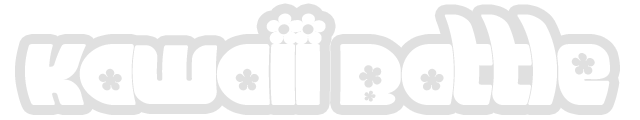
<style>
.page{position:relative;width:640px;height:120px;background:#ffffff}
.page>*{position:absolute;margin:0}
.t1{font:110px "Chick";color:#ffffff}
</style>
<div class="page">
<p class="t1" style="left:25px;top:13px;width:585px;height:92px">Kawaii Battle</p>
</div>
